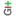
<style>
.page{position:relative;width:16px;height:16px;background:#ffffff}
.page>*{position:absolute;margin:0}
.t1{font:12.5px "Helvetica-Bold";letter-spacing:-0.025em}
.t2{font:10px "Helvetica-Bold";letter-spacing:-0.025em;color:#666666}
</style>
<div class="page">
<p class="t1" style="left:4px;top:1px;width:8px;height:7px">±</p>
<p class="t2" style="left:3px;top:8px;width:9px;height:8px;rotate:-90deg">G</p>
</div>
